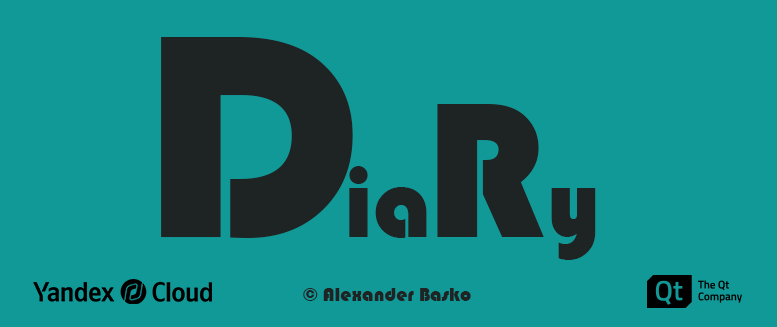
<style>
.page{position:relative;width:777px;height:327px;background:#119997}
.page>*{position:absolute;margin:0}
.t1{font:300px "Bauhaus93";color:#1e2323}
.t2{font:200px "Bauhaus93";color:#1e2323}
.t3{font:100px "Bauhaus93";color:#1e2323}
.t4{font:20px "Bauhaus93";color:#1e2323}
</style>
<div class="page">
<p class="t1" style="left:161px;top:37px;width:192px;height:201px">D</p>
<p class="t2" style="left:437px;top:104px;width:107px;height:133px">R</p>
<p class="t3" style="left:349px;top:166px;width:78px;height:72px">ia</p>
<p class="t3" style="left:551px;top:188px;width:45px;height:72px">y</p>
<p class="t4" style="left:303px;top:288px;width:168px;height:13px">© Alexander Basko</p>
</div>
